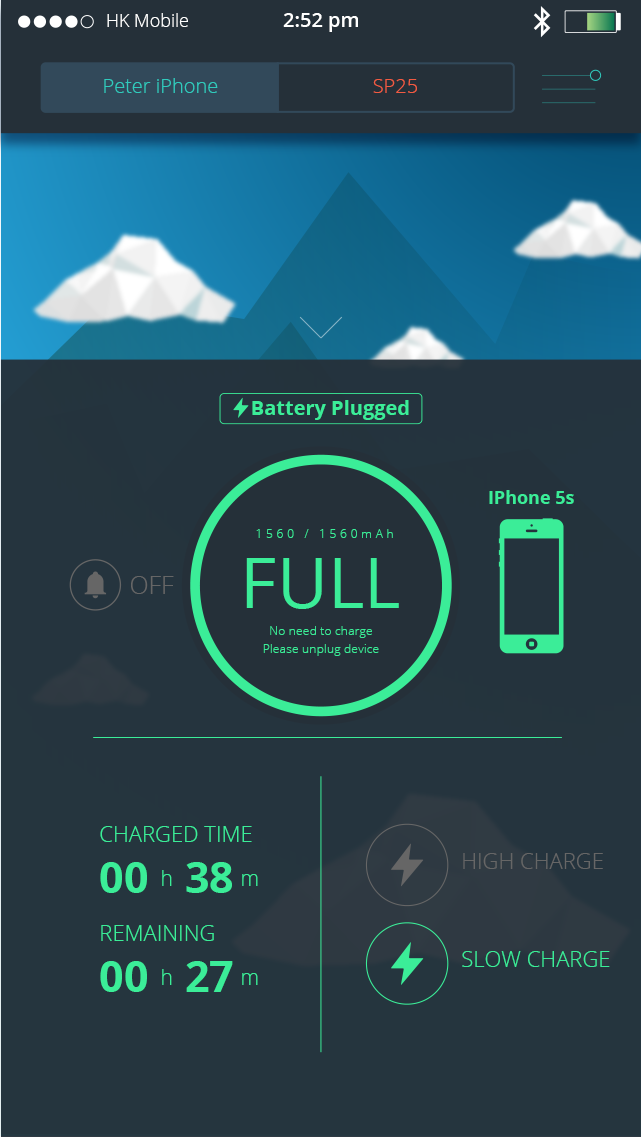
<style>
.page{position:relative;width:641px;height:1137px;background:#25353e}
.page>*{position:absolute;margin:0}
.t1{font:18px "OpenSans-Light";color:#ffffff}
.t2{font:20px "OpenSans-Semibold";color:#ffffff}
.t3{font:20px "OpenSans-Light";color:#30cbbd}
.t4{font:20px "OpenSans-Light";color:#f25b42}
.t5{font:20px "OpenSans-Bold";color:#3bed98}
.t6{font:18px "OpenSans-Bold";color:#3bed98}
.t7{font:12.4px "OpenSans-Light";letter-spacing:0.28em;color:#3bed98}
.t8{font:70px "OpenSans";color:#3bed98}
.t9{font:25px "OpenSans-Light";color:#666666}
.t10{font:12.4px/18px "OpenSans-Light";color:#3bed98}
.t11{font:22px "OpenSans-Light";color:#3bed98}
.t12{font:22px "OpenSans-Light";color:#666666}
.t13{font:43px "OpenSans-Bold";color:#3bed98}
.t14{font:21px "OpenSans-Light";color:#3bed98}
</style>
<div class="page">
<p class="t1" style="left:107px;top:13px;width:81px;height:14px">HK Mobile</p>
<p class="t2" style="left:283px;top:13px;width:75px;height:19px">2:52 pm</p>
<p class="t3" style="left:104px;top:78px;width:114px;height:15px">Peter iPhone</p>
<p class="t4" style="left:373px;top:79px;width:44px;height:14px">SP25</p>
<p class="t5" style="left:252px;top:400px;width:157px;height:20px">Battery Plugged</p>
<p class="t6" style="left:489px;top:490px;width:85px;height:14px">IPhone 5s</p>
<p class="t7" style="left:256px;top:529px;width:137px;height:9px">1560 / 1560mAh</p>
<p class="t8" style="left:246px;top:558px;width:153px;height:51px">FULL</p>
<p class="t9" style="left:131px;top:576px;width:43px;height:18px">OFF</p>
<p class="t10" style="left:263px;top:626px;width:116px;height:30px;text-align:center">No need to charge<br>Please unplug device</p>
<p class="t11" style="left:100px;top:826px;width:152px;height:16px">CHARGED TIME</p>
<p class="t12" style="left:463px;top:853px;width:140px;height:16px">HIGH CHARGE</p>
<p class="t13" style="left:100px;top:862px;width:47px;height:31px">00</p>
<p class="t14" style="left:162px;top:870px;width:10px;height:16px">h</p>
<p class="t13" style="left:186px;top:862px;width:46px;height:31px">38</p>
<p class="t14" style="left:242px;top:874px;width:16px;height:12px">m</p>
<p class="t11" style="left:101px;top:925px;width:113px;height:16px">REMAINING</p>
<p class="t11" style="left:462px;top:951px;width:148px;height:16px">SLOW CHARGE</p>
<p class="t13" style="left:100px;top:961px;width:47px;height:31px">00</p>
<p class="t13" style="left:186px;top:961px;width:47px;height:31px">27</p>
<p class="t14" style="left:162px;top:969px;width:10px;height:16px">h</p>
<p class="t14" style="left:242px;top:973px;width:16px;height:12px">m</p>
</div>
